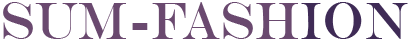
<style>
.page{position:relative;width:408px;height:50px;background:#ffffff}
.page>*{position:absolute;margin:0}
.t1{font:52.8px "EngraversMT";color:#6a496f;scale:0.83 1}
.t2{font:52.8px "EngraversMT";color:#3f2b56;scale:0.83 1}
</style>
<div class="page">
<p class="t1" style="left:3px;top:2px;width:405px;height:37px">Sum-Fash<span class="t2">ion</span></p>
</div>
